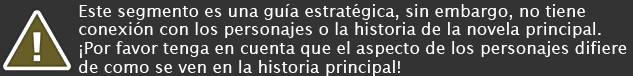
<style>
.page{position:relative;width:633px;height:76px;background:#333333}
.page>*{position:absolute;margin:0}
.t1{font:17.3px/18.7px "LucidaSans";letter-spacing:-0.01em;color:#ffffff}
</style>
<div class="page">
<p class="t1" style="left:79px;top:4px;width:548px;height:72px">Este segmento es una guía estratégica, sin embargo, no tiene<br>conexión con los personajes o la historia de la novela principal.<br>¡Por favor tenga en cuenta que el aspecto de los personajes difiere<br>de como se ven en la historia principal!</p>
</div>
